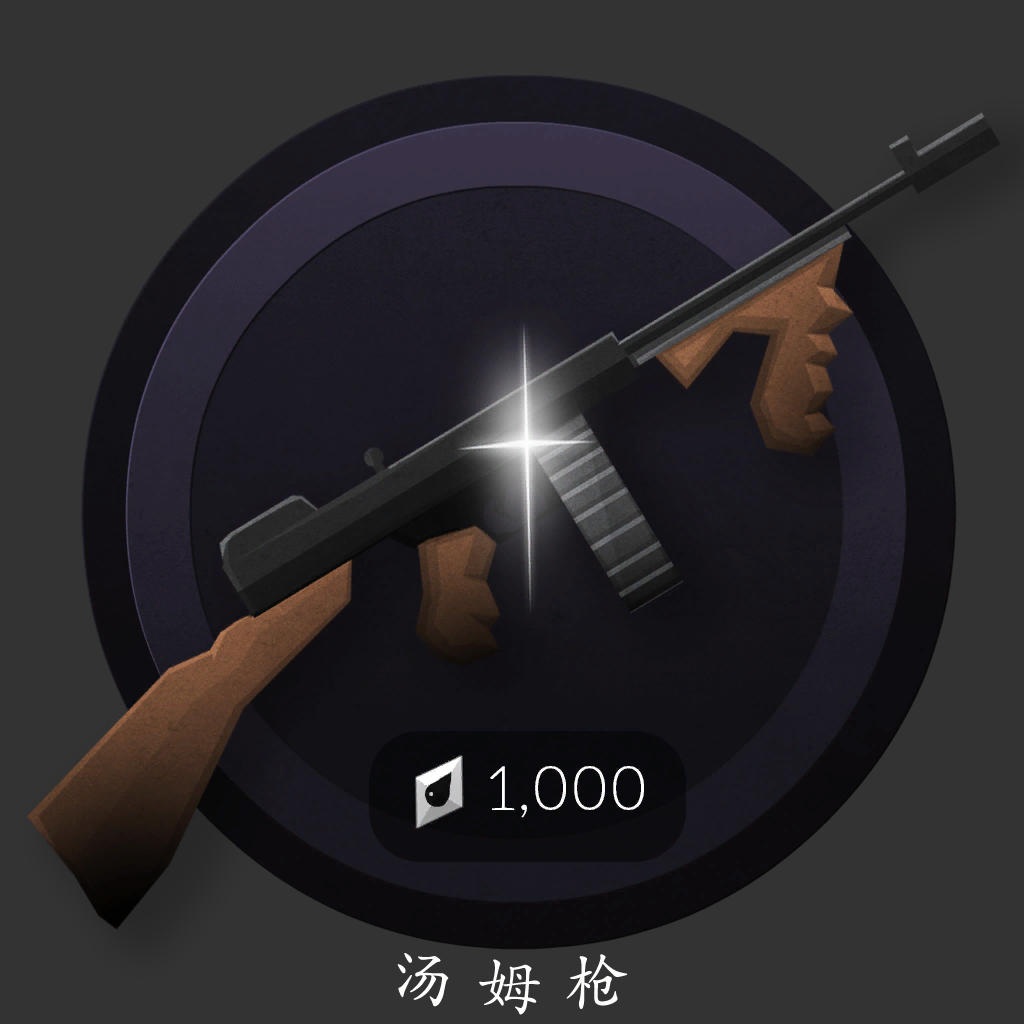
<style>
.page{position:relative;width:1024px;height:1024px;background:#333333}
.page>*{position:absolute;margin:0}
.t1{font:64px "STKaiti";letter-spacing:0.35em;color:#fdfdfc}
</style>
<div class="page">
<p class="t1" style="left:397px;top:953px;width:231px;height:62px">汤姆枪</p>
</div>
